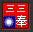
<style>
.page{position:relative;width:33px;height:32px;background:#f20000}
.page>*{position:absolute;margin:0}
.t1{font:10.4px "SimSun";color:#ffffff}
.t2{font:11.7px "SimSun";color:#ffffff}
</style>
<div class="page">
<p class="t1" style="left:6px;top:5px;width:19px;height:7px">三三</p>
<p class="t2" style="left:16px;top:15px;width:11px;height:12px">奉</p>
</div>
